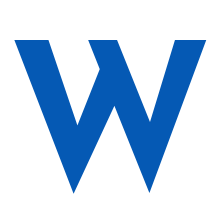
<style>
.page{position:relative;width:220px;height:220px;background:#ffffff}
.page>*{position:absolute;margin:0}
.t1{font:200px "JosefinSans-Bold";color:#0559b4}
</style>
<div class="page">
<p class="t1" style="left:14px;top:40px;width:193px;height:154px">W</p>
</div>
